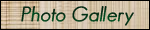
<style>
.page{position:relative;width:150px;height:30px}
.page>*{position:absolute;margin:0}
.t1{font:20px "GeosansLight-Oblique";color:#003516;font-weight:bold}
</style>
<div class="page">
<p class="t1" style="left:21px;top:6px;width:113px;height:20px">Photo Gallery</p>
</div>
